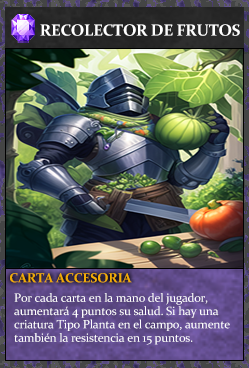
<style>
.page{position:relative;width:249px;height:368px}
.page>*{position:absolute;margin:0}
.t1{font:16px "Constantia-Bold";letter-spacing:-0.02em;color:#ffffff}
.t2{font:13.3px "Constantia-Bold";letter-spacing:-0.02em;color:#f2ac05}
.t3{font:12px/13.3px "Constantia";letter-spacing:-0.02em;color:#ffffff}
</style>
<div class="page">
<p class="t1" style="left:40px;top:24px;width:200px;height:12px">RECOLECTOR DE FRUTOS</p>
<p class="t2" style="left:10px;top:273px;width:122px;height:10px">CARTA ACCESORIA</p>
<p class="t3" style="left:14px;top:293px;width:216px;height:52px">Por cada carta en la mano del jugador, <br>aumentará 4 puntos su salud. Si hay una<br>criatura Tipo Planta en el campo, aumente<br>también la resistencia en 15 puntos.</p>
</div>
